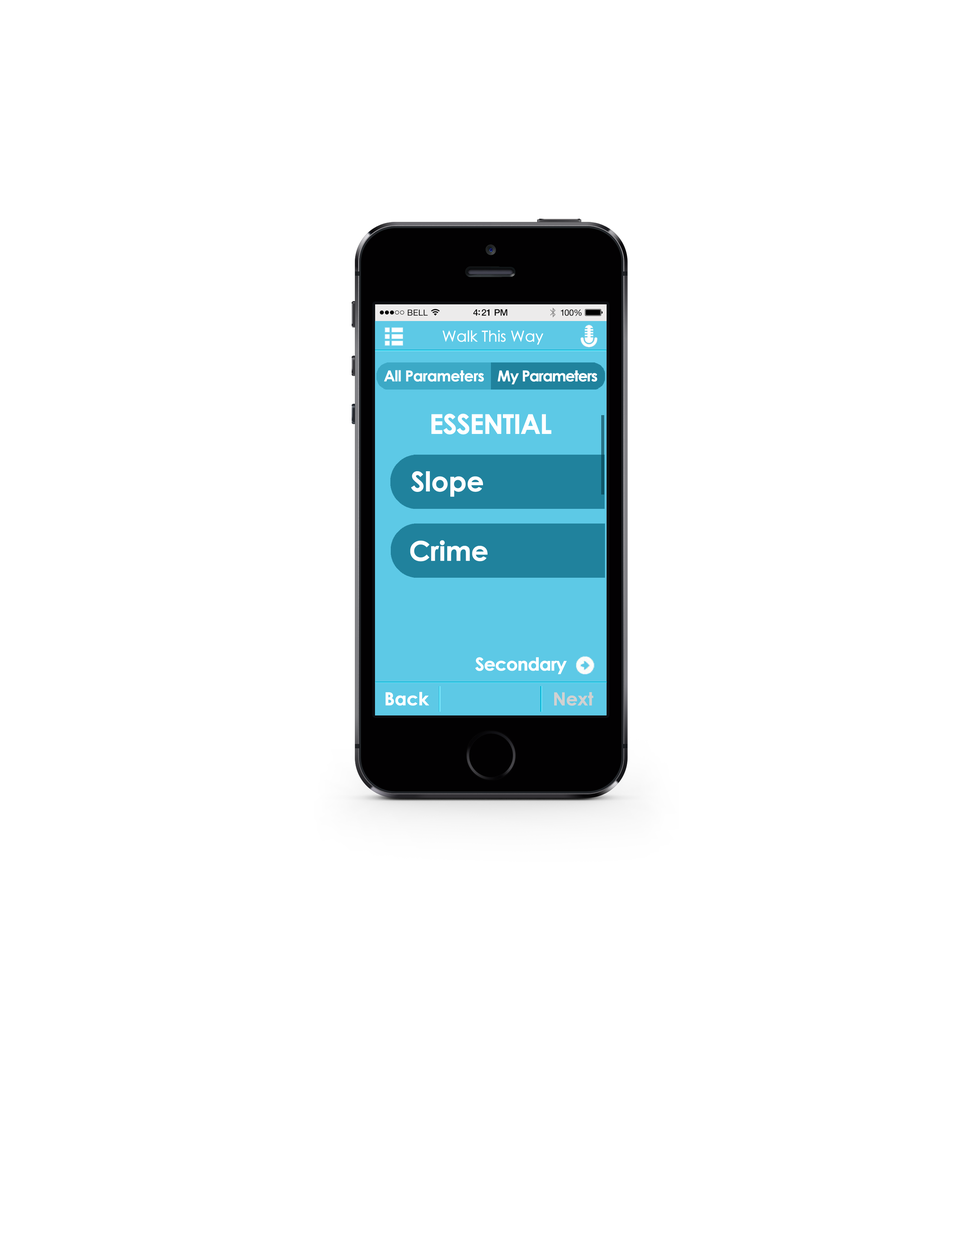
<style>
.page{position:relative;width:960px;height:1242px;background:#ffffff}
.page>*{position:absolute;margin:0}
.t1{font:15.1px "CenturyGothic";letter-spacing:-0.025em;color:#ffffff;font-weight:bold}
.t2{font:15.1px "CenturyGothic-Bold";letter-spacing:-0.05em;color:#ffffff;font-weight:bold}
.t3{font:15.1px "CenturyGothic-Bold";letter-spacing:-0.075em;color:#ffffff;font-weight:bold}
.t4{font:27.1px "CenturyGothic-Bold";letter-spacing:-0.05em;color:#ffffff;font-weight:bold}
.t5{font:27.1px "CenturyGothic-Bold";letter-spacing:-0.025em;color:#ffffff;font-weight:bold}
.t6{font:18.1px "CenturyGothic-Bold";letter-spacing:-0.05em;color:#ffffff;font-weight:bold}
.t7{font:18.1px "CenturyGothic-Bold";letter-spacing:-0.025em;color:#ffffff;font-weight:bold}
.t8{font:18.1px "CenturyGothic-Bold";letter-spacing:-0.025em;color:#d1d1d1;font-weight:bold}
</style>
<div class="page">
<p class="t1" style="left:442px;top:330px;width:101px;height:15px">Walk This Way</p>
<p class="t2" style="left:384px;top:370px;width:100px;height:12px">All Parameters</p>
<p class="t3" style="left:498px;top:370px;width:99px;height:15px">My Parameters</p>
<p class="t4" style="left:431px;top:414px;width:120px;height:21px">ESSENTIAL</p>
<p class="t5" style="left:411px;top:471px;width:72px;height:26px">Slope</p>
<p class="t5" style="left:410px;top:540px;width:77px;height:22px">Crime</p>
<p class="t6" style="left:475px;top:657px;width:92px;height:18px">Secondary</p>
<p class="t7" style="left:385px;top:692px;width:44px;height:14px">Back</p>
<p class="t8" style="left:554px;top:692px;width:39px;height:14px">Next</p>
</div>
